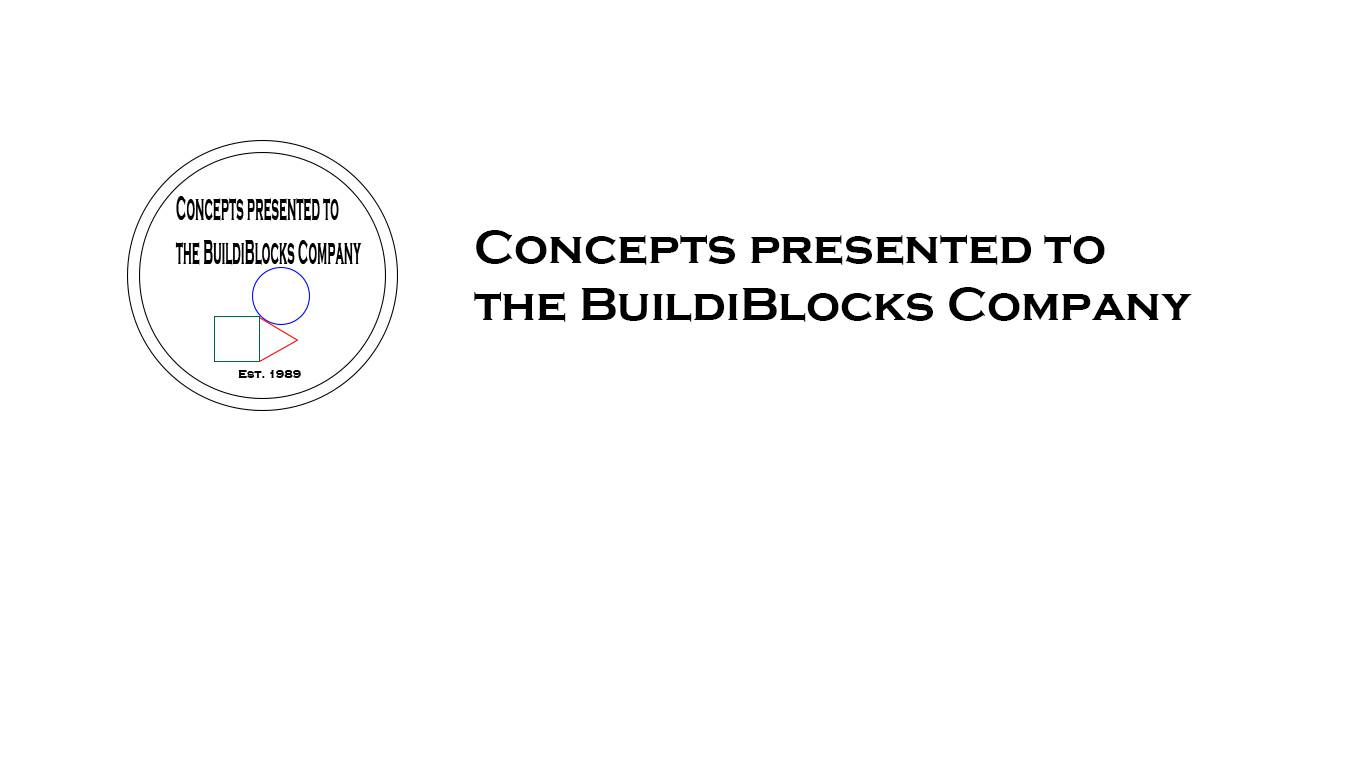
<style>
.page{position:relative;width:1366px;height:768px;background:#ffffff}
.page>*{position:absolute;margin:0}
.t1{font:48px "CopperplateGothic-Bold";color:#000000}
</style>
<div class="page">
<p class="t1" style="left:474px;top:230px;width:718px;height:92px">Concepts presented to <br>the BuildiBlocks Company</p>
</div>
